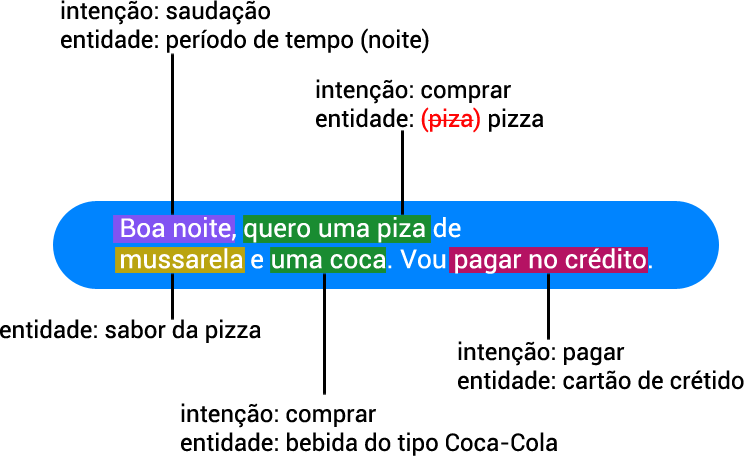
<style>
.page{position:relative;width:744px;height:456px;background:#ffffff}
.page>*{position:absolute;margin:0}
.t1{font:24px "Roboto-Regular";color:#000000}
.t2{font:24px "Roboto-Regular";color:#ff0505}
.t3{font:26px "Roboto-Regular";color:#ffffff}
</style>
<div class="page">
<p class="t1" style="left:61px;top:0px;width:368px;height:54px">intenção: saudação<br>entidade: período de tempo (noite)</p>
<p class="t1" style="left:316px;top:79px;width:227px;height:54px">intenção: comprar<br>entidade: <span class="t2">(piza) </span>pizza</p>
<p class="t3" style="left:121px;top:217px;width:531px;height:57px">Boa noite, quero uma piza de<br>mussarela e uma coca. Vou pagar no crédito.</p>
<p class="t1" style="left:0px;top:319px;width:261px;height:24px">entidade: sabor da pizza</p>
<p class="t1" style="left:458px;top:341px;width:286px;height:49px">intenção: pagar<br>entidade: cartão de crétido</p>
<p class="t1" style="left:181px;top:403px;width:376px;height:53px">intenção: comprar<br>entidade: bebida do tipo Coca-Cola</p>
</div>
